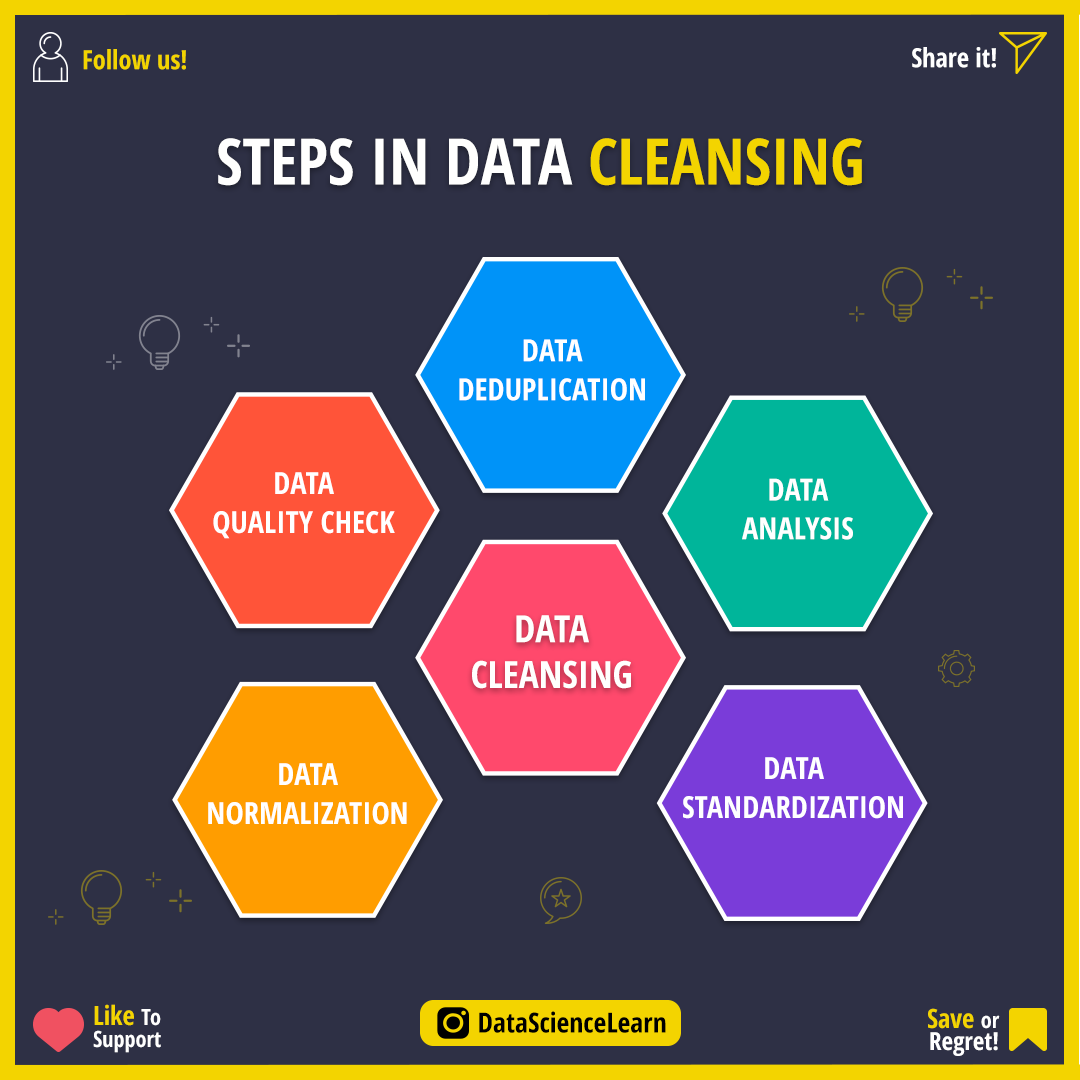
<style>
.page{position:relative;width:1080px;height:1080px;background:#2e3045}
.page>*{position:absolute;margin:0}
.t1{font:26.4px "OpenSans-CondensedBold";color:#f3d400}
.t2{font:26.4px "OpenSans-CondensedBold";color:#ffffff}
.t3{font:63.9px "OpenSans-CondensedBold";color:#fffffe}
.t4{font:63.9px "OpenSans-CondensedBold";color:#f3d400}
.t5{font:30.6px/38.9px "OpenSans-CondensedBold";color:#ffffff}
.t6{font:37.5px/45.8px "OpenSans-CondensedBold";color:#fffffe}
.t7{font:22.2px/22.2px "OpenSans-CondensedBold";color:#ffffff}
.t8{font:26.4px/22.2px "OpenSans-CondensedBold";color:#f3d400}
.t9{font:27.8px "OpenSans-CondensedBold";color:#000000}
.t10{font:25px/22.2px "OpenSans-CondensedBold";color:#ffffff}
</style>
<div class="page">
<p class="t1" style="left:83px;top:49px;width:103px;height:21px">Follow us!</p>
<p class="t2" style="left:912px;top:47px;width:84px;height:21px">Share it!</p>
<p class="t3" style="left:218px;top:138px;width:644px;height:48px">STEPS IN DATA <span class="t4">CLEANSING</span></p>
<p class="t5" style="left:459px;top:339px;width:186px;height:62px;text-align:center">DATA<br>DEDUPLICATION</p>
<p class="t5" style="left:213px;top:472px;width:182px;height:67px;text-align:center">DATA<br>QUALITY CHECK</p>
<p class="t5" style="left:742px;top:478px;width:111px;height:62px;text-align:center">DATA<br>ANALYSIS</p>
<p class="t6" style="left:472px;top:615px;width:159px;height:74px;text-align:center">DATA<br>CLEANSING</p>
<p class="t5" style="left:683px;top:757px;width:220px;height:62px;text-align:center">DATA<br>STANDARDIZATION</p>
<p class="t5" style="left:208px;top:763px;width:199px;height:62px;text-align:center">DATA<br>NORMALIZATION</p>
<p class="t7" style="left:93px;top:1004px;width:68px;height:49px"><span class="t8">Like </span>To<br>Support</p>
<p class="t9" style="left:479px;top:1011px;width:187px;height:22px">DataScienceLearn</p>
<p class="t10" style="left:928px;top:1008px;width:72px;height:48px;text-align:right"><span class="t8">Save </span><span class="t7">or<br></span>Regret!</p>
</div>
